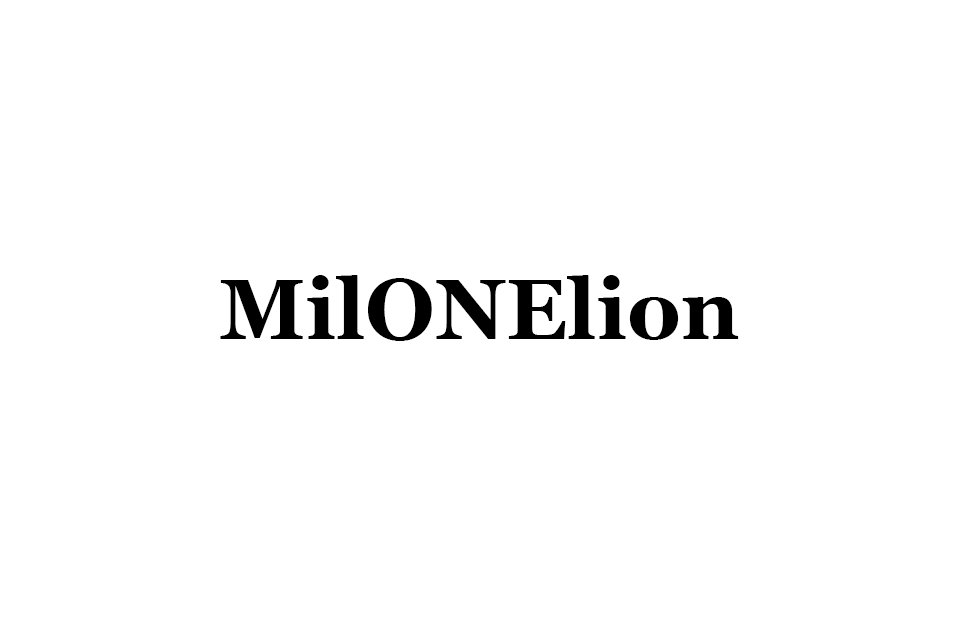
<style>
.page{position:relative;width:960px;height:640px;background:#ffffff}
.page>*{position:absolute;margin:0}
.t1{font:85px "Georgia-Bold";color:#000000}
</style>
<div class="page">
<p class="t1" style="left:220px;top:275px;width:519px;height:66px">MilONElion</p>
</div>
